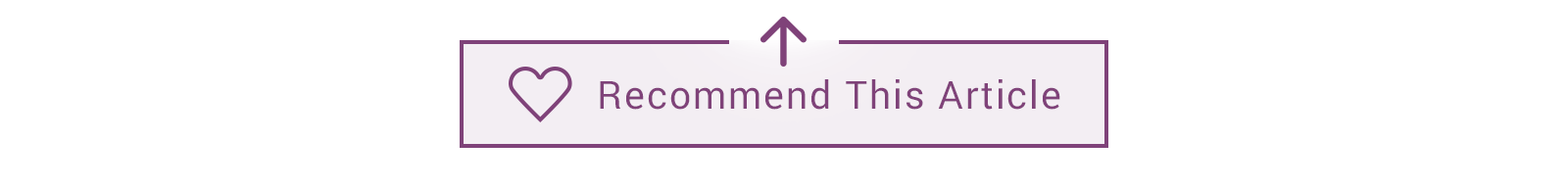
<style>
.page{position:relative;width:1568px;height:188px;background:#ffffff}
.page>*{position:absolute;margin:0}
.t1{font:38.7px "Roboto-Regular";letter-spacing:0.05em;color:#7f4279}
</style>
<div class="page">
<p class="t1" style="left:600px;top:79px;width:460px;height:31px">Recommend This Article</p>
</div>
